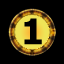
<style>
.page{position:relative;width:64px;height:64px;background:#000000}
.page>*{position:absolute;margin:0}
.t1{font:34.7px "Verdana-Bold";color:#000000}
</style>
<div class="page">
<p class="t1" style="left:24px;top:18px;width:18px;height:27px">1</p>
</div>
